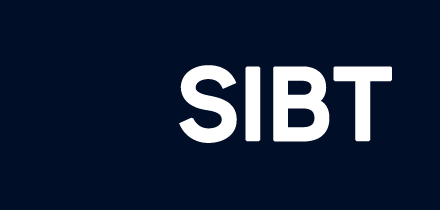
<style>
.page{position:relative;width:440px;height:210px;background:#000f27}
.page>*{position:absolute;margin:0}
.t1{font:102px "Uni-Sans-SemiBold";color:#ffffff;font-weight:bold}
</style>
<div class="page">
<p class="t1" style="left:179px;top:65px;width:213px;height:78px">SIBT</p>
</div>
